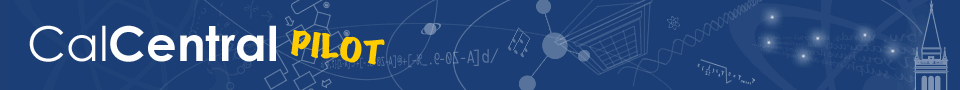
<style>
.page{position:relative;width:960px;height:90px;background:#1c3e76}
.page>*{position:absolute;margin:0}
.t1{font:48px "CenturyGothic-Bold";color:#fefefe}
.t2{font:48px "CenturyGothic";color:#fefefe}
.t3{font:30px "MarkerFelt-Wide";color:#ffcc00;text-transform:uppercase;scale:1.25 1}
.t4{font:30px "MarkerFelt-Thin";color:#ffcc00;text-transform:uppercase;scale:1.58 1}
</style>
<div class="page">
<p class="t1" style="left:29px;top:25px;width:247px;height:37px"><span class="t2">Cal</span>Central</p>
<p class="t3" style="left:291px;top:30px;width:94px;height:35px;rotate:7deg">Pi<span class="t4">l</span>ot</p>
</div>
